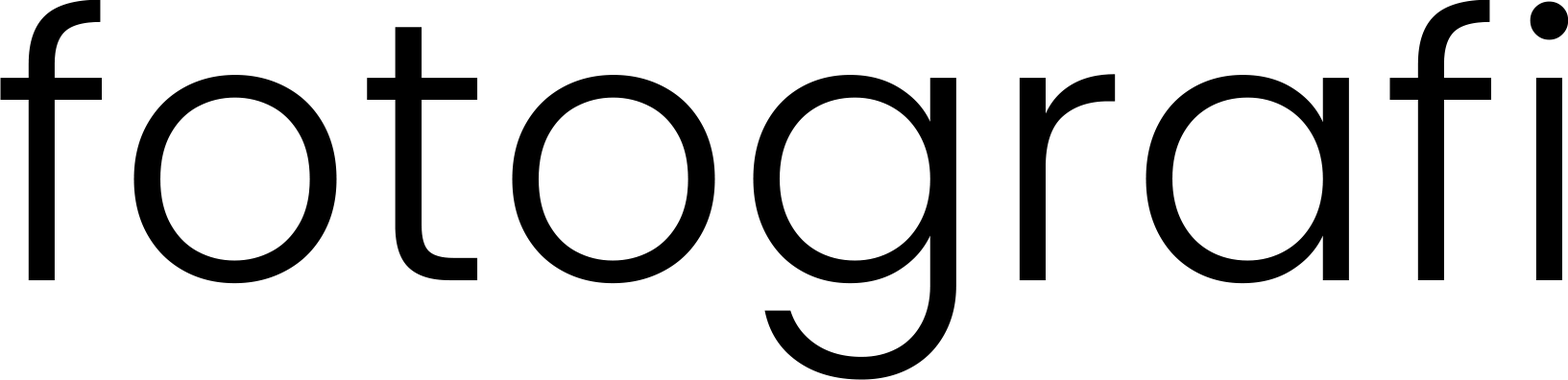
<style>
.page{position:relative;width:1568px;height:380px;background:#ffffff}
.page>*{position:absolute;margin:0}
.t1{font:370.8px "Poppins-Light";letter-spacing:0.01em;color:#000000}
</style>
<div class="page">
<p class="t1" style="left:0px;top:0px;width:1569px;height:380px">fotografi</p>
</div>
